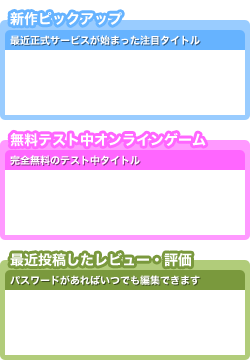
<style>
.page{position:relative;width:250px;height:360px;background:#ffffff}
.page>*{position:absolute;margin:0}
.t1{font:14px "HiraginoKaku-W7-90msp-RKSJ-H";color:#ffffff}
.t2{font:10px "HiraginoKaku-W7-90msp-RKSJ-H";color:#ffffff}
</style>
<div class="page">
<p class="t1" style="left:10px;top:12px;width:112px;height:14px">新作ピックアップ</p>
<p class="t2" style="left:10px;top:35px;width:190px;height:10px">最近正式サービスが始まった注目タイトル</p>
<p class="t1" style="left:10px;top:132px;width:196px;height:15px">無料テスト中オンラインゲーム</p>
<p class="t2" style="left:10px;top:155px;width:130px;height:10px">完全無料のテスト中タイトル</p>
<p class="t1" style="left:10px;top:253px;width:182px;height:14px">最近投稿したレビュー・評価</p>
<p class="t2" style="left:10px;top:275px;width:190px;height:10px">パスワードがあればいつでも編集できます</p>
</div>
